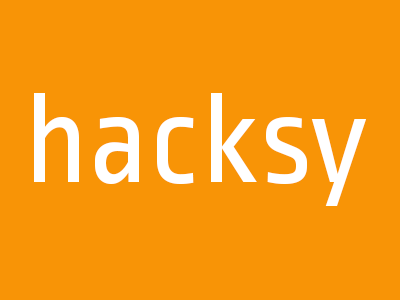
<style>
.page{position:relative;width:400px;height:300px;background:#f89406}
.page>*{position:absolute;margin:0}
.t1{font:130px "RopaSans-Regular";color:#ffffff}
</style>
<div class="page">
<p class="t1" style="left:34px;top:93px;width:333px;height:113px">hacksy</p>
</div>
